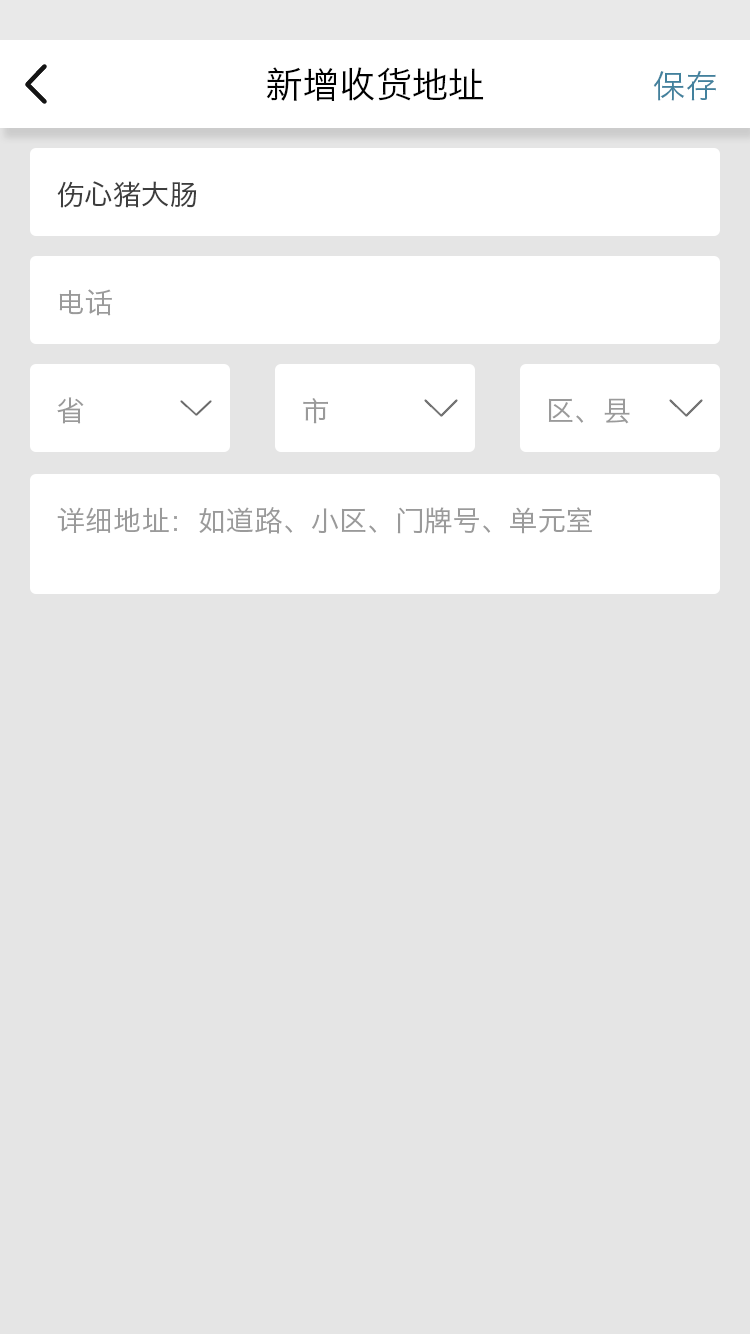
<style>
.page{position:relative;width:750px;height:1334px;background:#e5e5e5}
.page>*{position:absolute;margin:0}
.t1{font:36px "HiraginoSansGB-W3";color:#000000}
.t2{font:32px "HiraginoSansGB-W3";color:#42819d}
.t3{font:28px "HiraginoSansGB-W3";color:#3d3d3d}
.t4{font:28px "HiraginoSansGB-W3";color:#9a9a9a}
</style>
<div class="page">
<p class="t1" style="left:266px;top:67px;width:218px;height:34px">新增收货地址</p>
<p class="t2" style="left:653px;top:71px;width:63px;height:30px">保存</p>
<p class="t3" style="left:57px;top:181px;width:140px;height:27px">伤心猪大肠</p>
<p class="t4" style="left:59px;top:289px;width:53px;height:27px">电话</p>
<p class="t4" style="left:57px;top:397px;width:27px;height:27px">省</p>
<p class="t4" style="left:303px;top:398px;width:25px;height:26px">市</p>
<p class="t4" style="left:548px;top:398px;width:82px;height:26px">区、县</p>
<p class="t4" style="left:57px;top:507px;width:535px;height:27px">详细地址：如道路、小区、门牌号、单元室</p>
</div>
